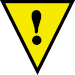
<style>
.page{position:relative;width:75px;height:75px;background:#ffffff}
.page>*{position:absolute;margin:0}
.t1{font:44px "StencilStd";color:#000000}
</style>
<div class="page">
<p class="t1" style="left:31px;top:10px;width:11px;height:35px">!</p>
</div>
